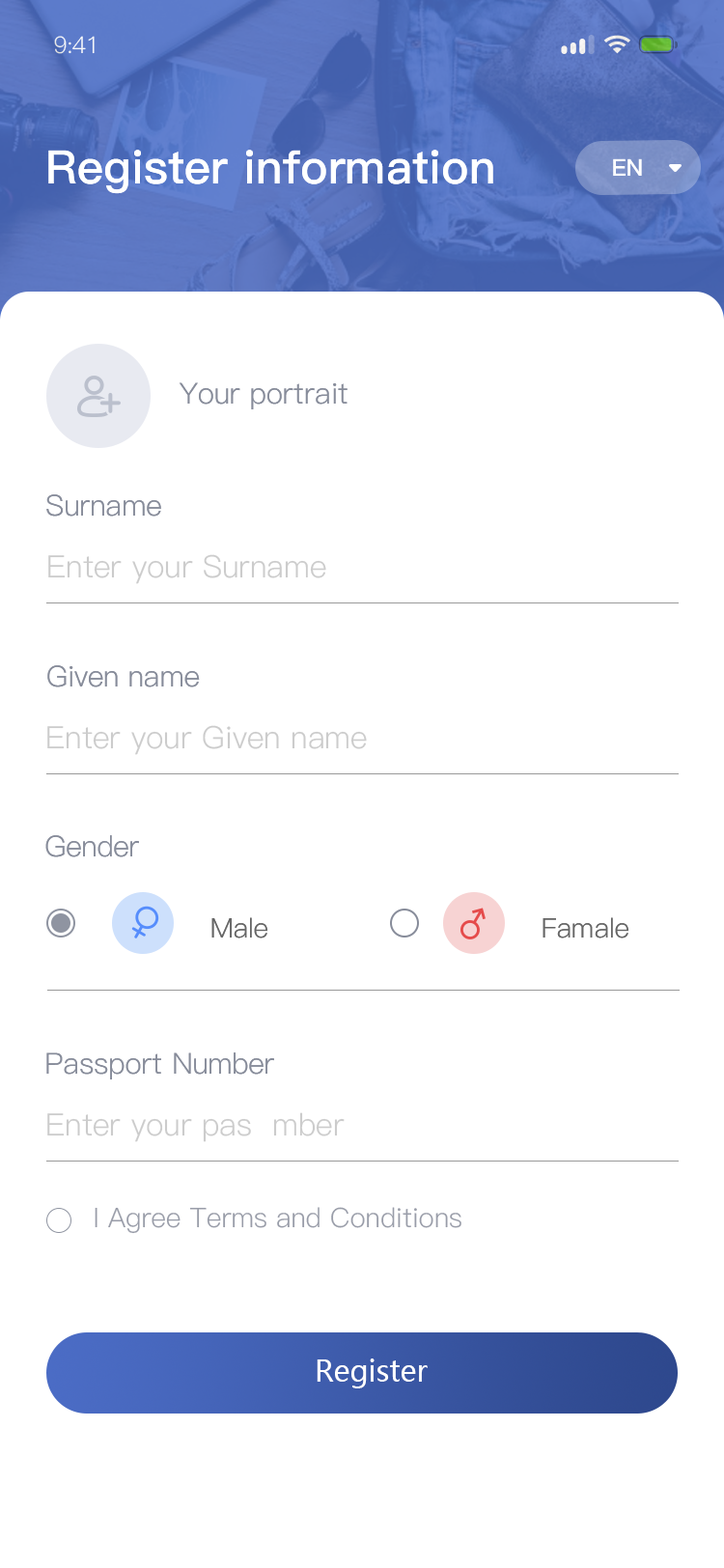
<style>
.page{position:relative;width:724px;height:1568px;background:#ffffff}
.page>*{position:absolute;margin:0}
.t1{font:23.2px "PingFang-SC-Regular";letter-spacing:-0.025em;color:#ffffff}
.t2{font:46.3px "PingFang-SC-Bold";color:#ffffff}
.t3{font:23.2px "PingFang-SC-Bold";color:#ffffff}
.t4{font:29px "PingFang-SC-Regular";color:#878c9a}
.t5{font:29px "PingFang-SC-Regular";color:#878c9a;text-transform:uppercase}
.t6{font:30.9px "PingFang-SC-Regular";color:#cccccc}
.t7{font:30.9px "PingFang-SC-Regular";color:#cccccc;text-transform:uppercase}
.t8{font:27px "PingFang-SC-Regular";color:#666666}
.t9{font:27px "PingFang-SC-Regular";color:#999da9}
.t10{font:29px "MicrosoftYaHei";color:#ffffff}
</style>
<div class="page">
<p class="t1" style="left:54px;top:36px;width:41px;height:18px">9:41</p>
<p class="t2" style="left:48px;top:150px;width:445px;height:44px">Register information</p>
<p class="t3" style="left:613px;top:158px;width:29px;height:18px">EN</p>
<p class="t4" style="left:179px;top:382px;width:169px;height:27px"><span class="t5">y</span>our portrait</p>
<p class="t4" style="left:46px;top:494px;width:115px;height:23px"><span class="t5">s</span>urname</p>
<p class="t6" style="left:48px;top:554px;width:278px;height:30px">Enter your Surname</p>
<p class="t4" style="left:47px;top:665px;width:153px;height:22px"><span class="t5">g</span>iven name</p>
<p class="t6" style="left:47px;top:725px;width:320px;height:30px">Enter your <span class="t7">g</span>iven name</p>
<p class="t4" style="left:45px;top:835px;width:94px;height:22px"><span class="t5">g</span>ender</p>
<p class="t8" style="left:211px;top:917px;width:57px;height:21px">Male</p>
<p class="t8" style="left:543px;top:917px;width:87px;height:21px">Famale</p>
<p class="t4" style="left:46px;top:1052px;width:228px;height:27px"><span class="t5">p</span>assport <span class="t5">n</span>umber</p>
<p class="t6" style="left:47px;top:1112px;width:298px;height:30px">Enter your pas  mber</p>
<p class="t9" style="left:95px;top:1207px;width:367px;height:27px">I Agree Terms and Conditions</p>
<p class="t10" style="left:317px;top:1358px;width:111px;height:30px">Register</p>
</div>
